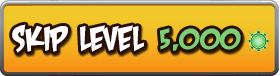
<style>
.page{position:relative;width:280px;height:76px}
.page>*{position:absolute;margin:0}
.t1{font:49.1px "CrashLandingBB";color:#ffffff}
.t2{font:40px "CrashLandingBB";color:#7bd076}
</style>
<div class="page">
<p class="t1" style="left:12px;top:24px;width:133px;height:29px">Skip Level</p>
<p class="t2" style="left:159px;top:28px;width:82px;height:23px">5,000</p>
</div>
